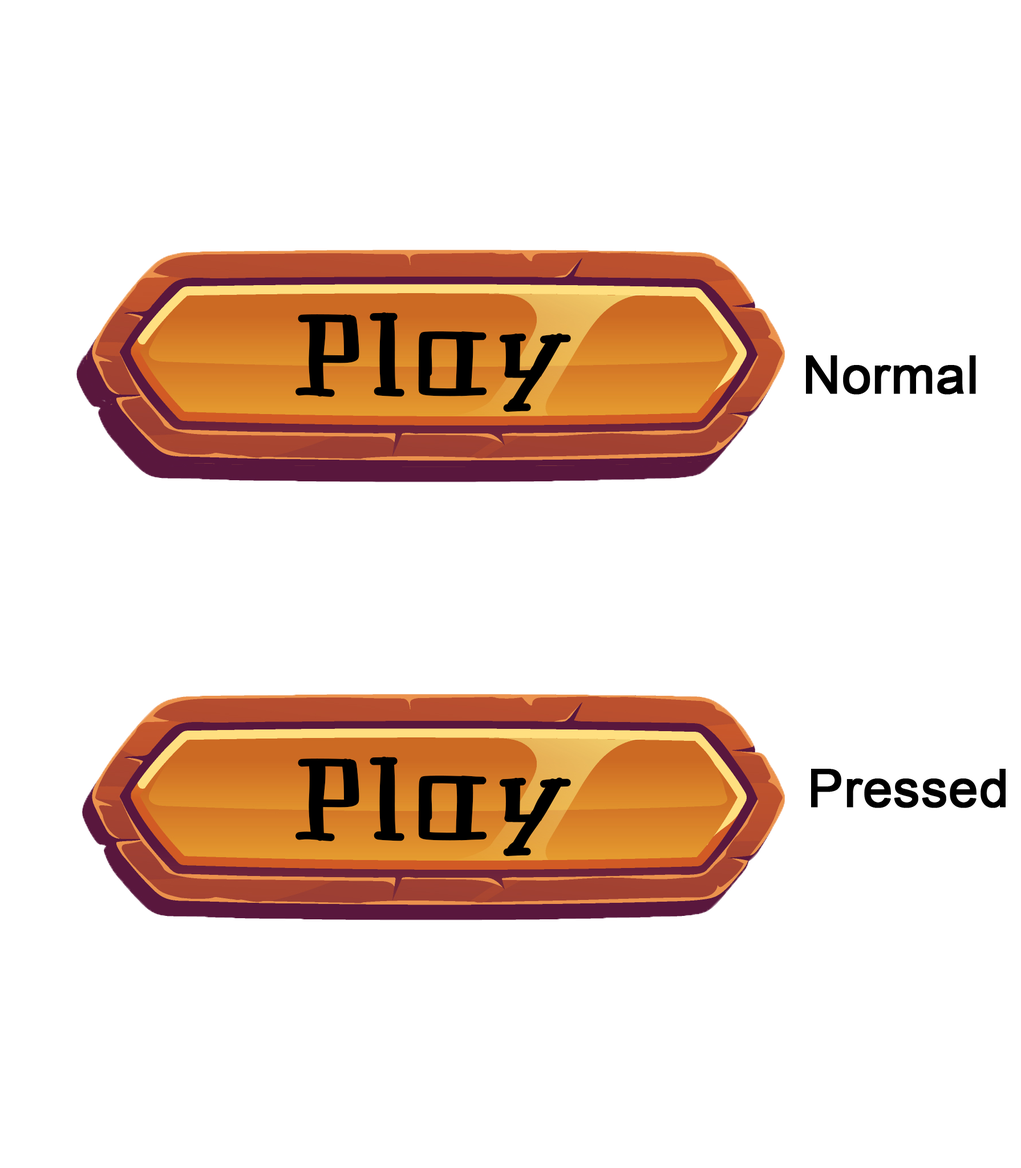
<style>
.page{position:relative;width:1021px;height:1168px;background:#ffffff}
.page>*{position:absolute;margin:0}
.t1{font:111.1px "Historian";color:#000000;font-weight:bold}
.t2{font:52.3px "ArialMT";color:#000000;font-weight:bold}
</style>
<div class="page">
<p class="t1" style="left:295px;top:312px;width:276px;height:100px">Play</p>
<p class="t2" style="left:806px;top:355px;width:170px;height:40px">Normal</p>
<p class="t1" style="left:295px;top:756px;width:276px;height:101px">Play</p>
<p class="t2" style="left:811px;top:769px;width:194px;height:39px">Pressed</p>
</div>
